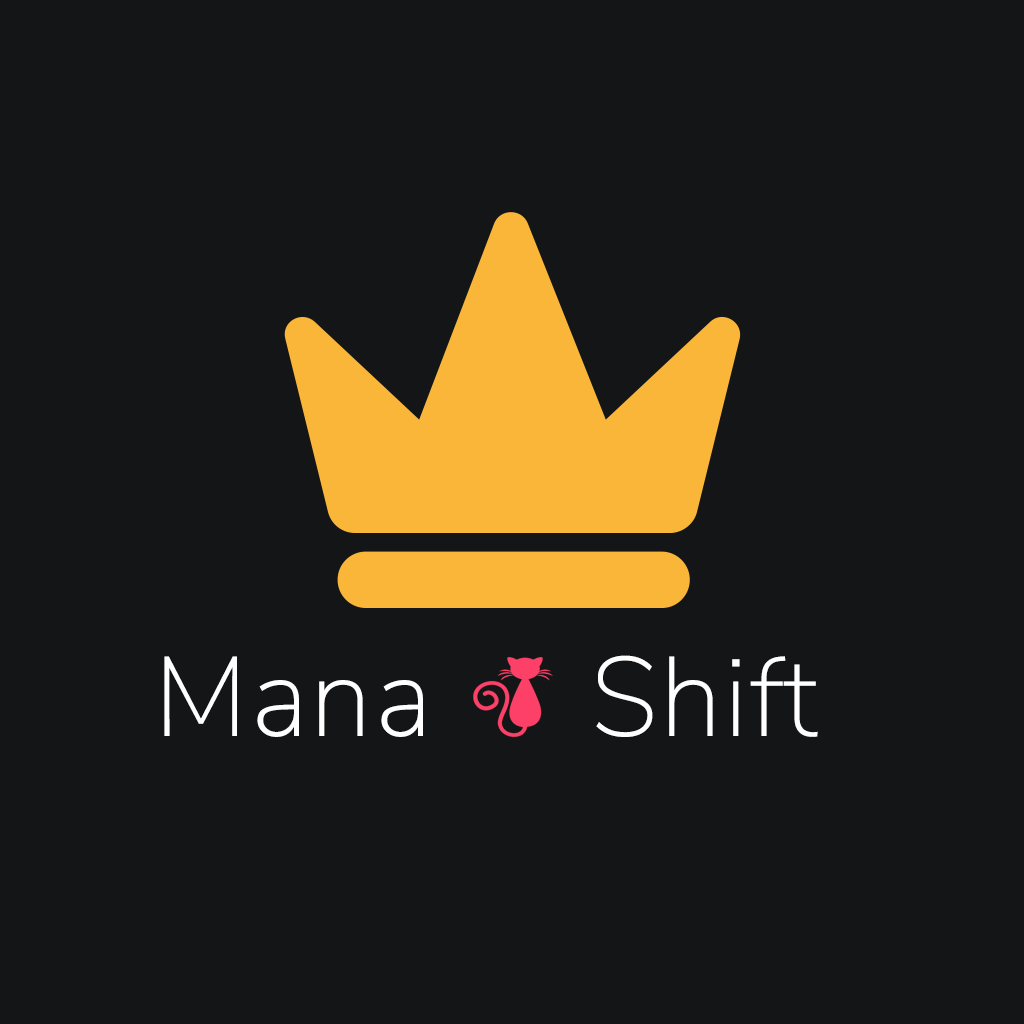
<style>
.page{position:relative;width:1024px;height:1024px;background:#141517}
.page>*{position:absolute;margin:0}
.t1{font:112.5px "NunitoSans-ExtraLight";letter-spacing:0.02em;color:#ffffff}
</style>
<div class="page">
<p class="t1" style="left:164px;top:656px;width:259px;height:81px">Mana</p>
<p class="t1" style="left:596px;top:655px;width:222px;height:82px">Shift</p>
</div>
